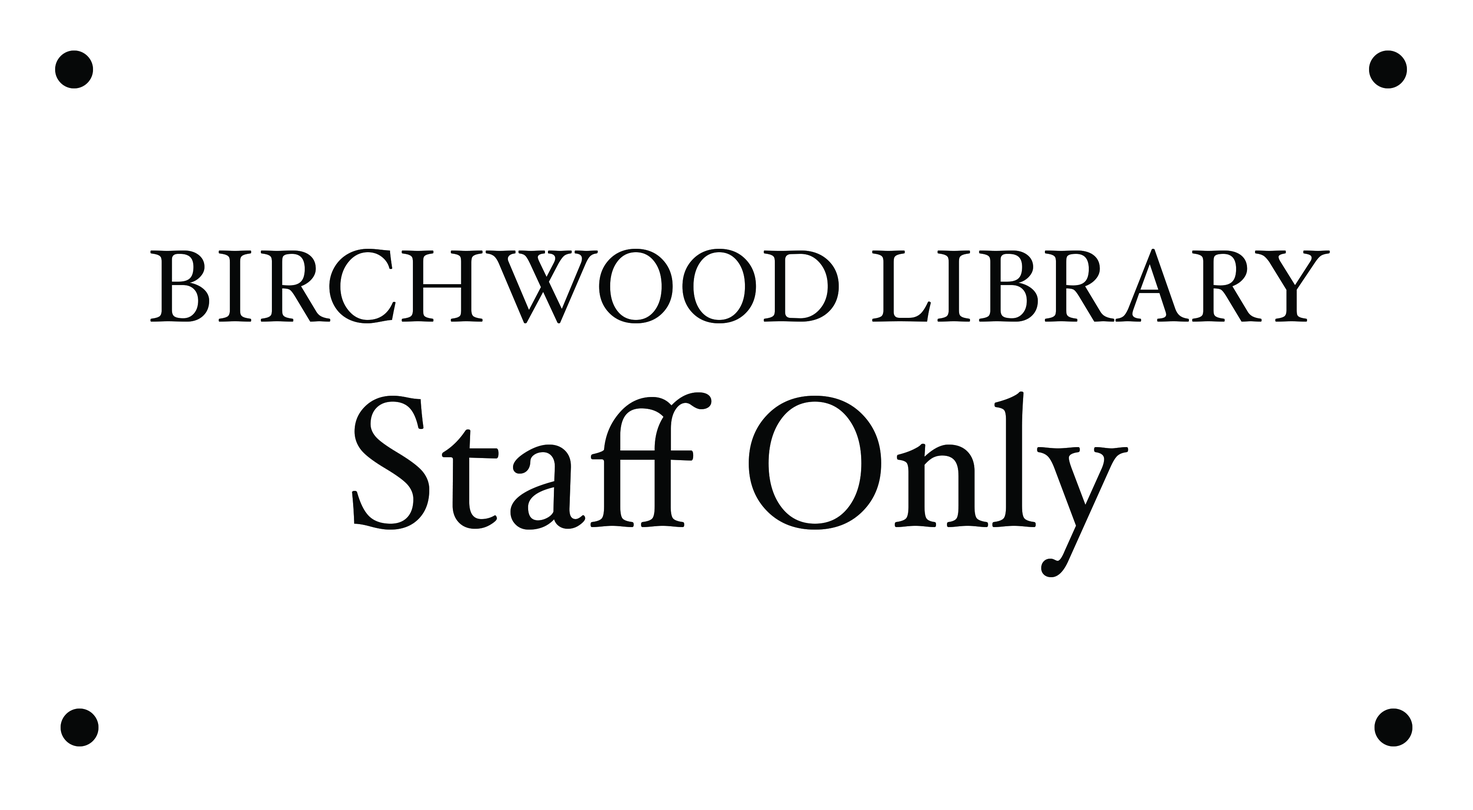
<style>
.page{position:relative;width:1473px;height:810px;background:#ffffff}
.page>*{position:absolute;margin:0}
.t1{font:102.6px "HoeflerText";letter-spacing:0.005em;color:#060808}
.t2{font:184.7px "HoeflerText";letter-spacing:0.005em;color:#060808}
</style>
<div class="page">
<p class="t1" style="left:150px;top:249px;width:1180px;height:74px">BIRCHWOOD LIBRARY</p>
<p class="t2" style="left:352px;top:391px;width:776px;height:186px">Staff Only</p>
</div>
